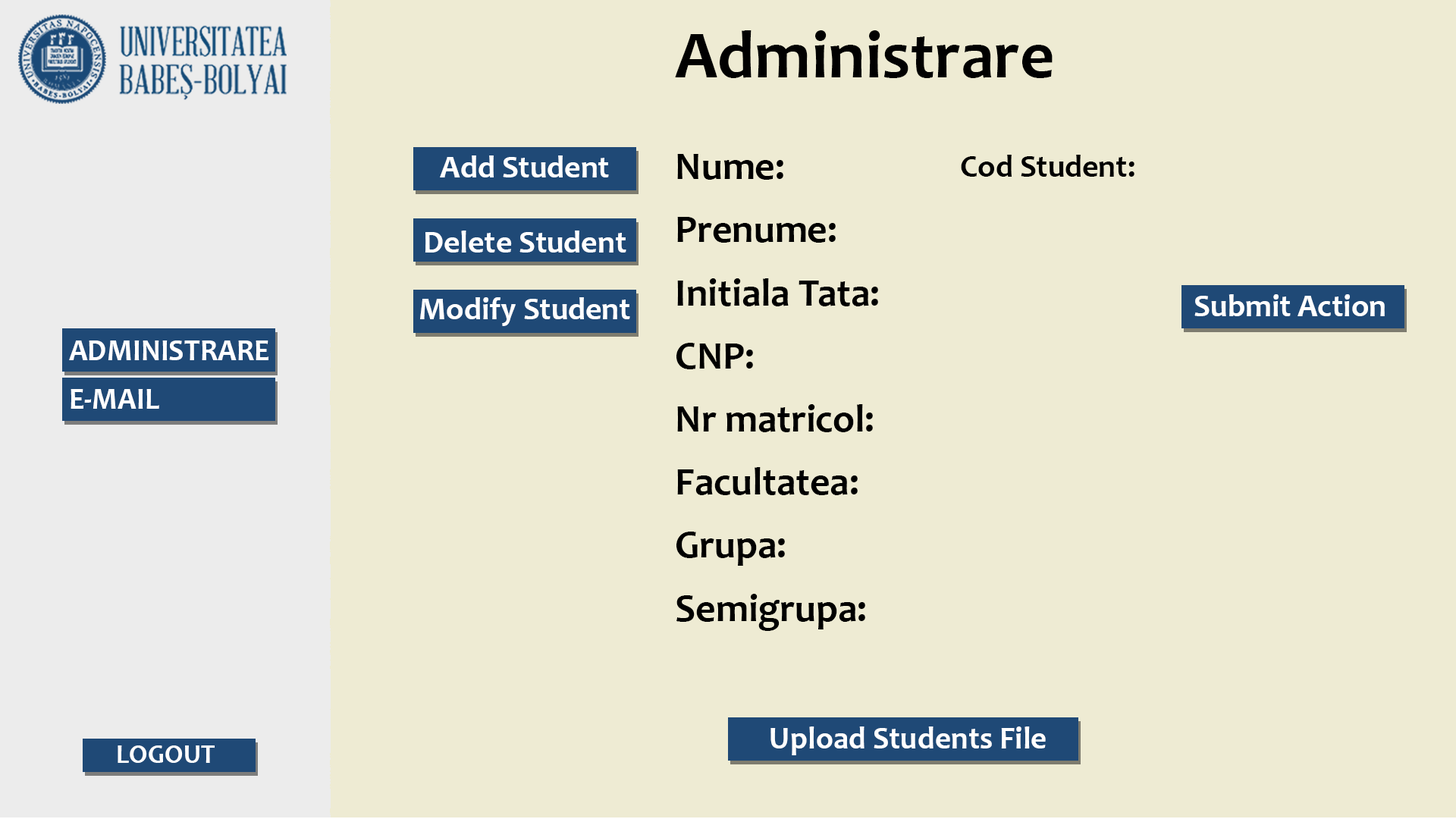
<style>
.page{position:relative;width:1456px;height:819px;background:#eeebd3}
.page>*{position:absolute;margin:0}
.t1{font:67.5px "Candara-Bold";color:#000000}
.t2{font:31.6px "Candara-Bold";color:#ffffff}
.t3{font:39.1px/63.1px "Candara-Bold";color:#000000}
.t4{font:31.6px "Candara-Bold";color:#000000}
.t5{font:30px/48.4px "Candara-Bold";color:#ffffff}
.t6{font:26.8px "Candara-Bold";color:#ffffff}
</style>
<div class="page">
<p class="t1" style="left:675px;top:30px;width:378px;height:48px">Administrare</p>
<p class="t2" style="left:440px;top:155px;width:169px;height:22px">Add Student</p>
<p class="t3" style="left:676px;top:154px;width:202px;height:477px">Nume:<br>Prenume:<br>Initiala Tata:<br>CNP:<br>Nr matricol:<br>Facultatea:<br>Grupa:<br>Semigrupa:</p>
<p class="t4" style="left:961px;top:155px;width:173px;height:22px">Cod Student:</p>
<p class="t2" style="left:425px;top:231px;width:201px;height:22px">Delete Student</p>
<p class="t2" style="left:420px;top:297px;width:210px;height:29px">Modify Student</p>
<p class="t2" style="left:1194px;top:294px;width:191px;height:22px">Submit Action</p>
<p class="t5" style="left:69px;top:340px;width:200px;height:69px">ADMINISTRARE<br>E-MAIL</p>
<p class="t2" style="left:770px;top:726px;width:276px;height:29px">Upload Students File</p>
<p class="t6" style="left:118px;top:745px;width:97px;height:18px">LOGOUT</p>
</div>
